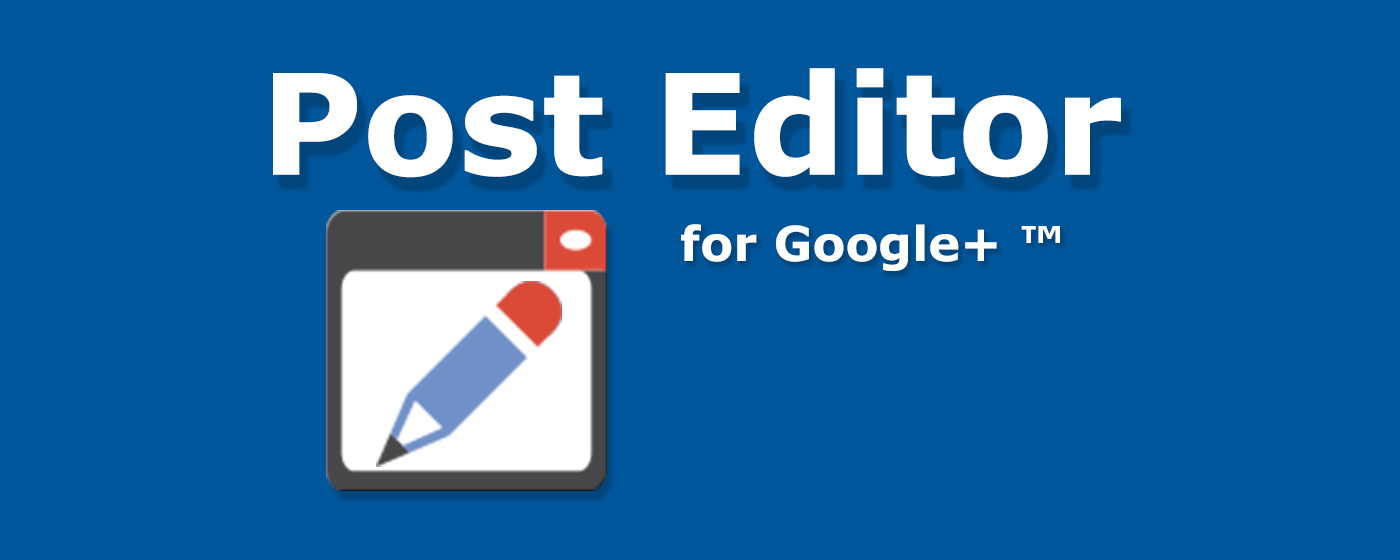
<style>
.page{position:relative;width:1400px;height:560px;background:#00569b}
.page>*{position:absolute;margin:0}
.t1{font:139.7px "Verdana-Bold";color:#ffffff}
.t2{font:48px "Verdana-Bold";color:#ffffff}
</style>
<div class="page">
<p class="t1" style="left:273px;top:68px;width:848px;height:110px">Post Editor</p>
<p class="t2" style="left:681px;top:224px;width:379px;height:47px">for Google+ ™</p>
</div>
